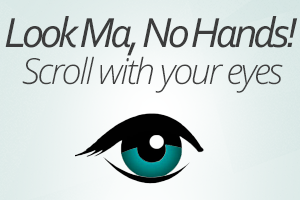
<style>
.page{position:relative;width:300px;height:200px}
.page>*{position:absolute;margin:0}
.t1{font:44px "Corbel-Italic";letter-spacing:-0.085em;color:#3c3c3c}
.t2{font:36px "OpenSansLight-Italic";letter-spacing:-0.065em;color:#404040}
</style>
<div class="page">
<p class="t1" style="left:5px;top:16px;width:293px;height:40px">Look Ma, No Hands!</p>
<p class="t2" style="left:22px;top:56px;width:261px;height:37px">Scroll with your eyes</p>
</div>
